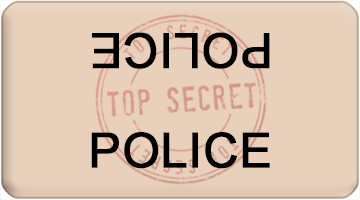
<style>
.page{position:relative;width:360px;height:200px;background:#e8d0bb}
.page>*{position:absolute;margin:0}
.t1{font:48px "ArialMT";color:#000000;font-weight:bold}
</style>
<div class="page">
<p class="t1" style="left:92px;top:32px;width:178px;height:37px;rotate:180deg">POLICE</p>
<p class="t1" style="left:91px;top:132px;width:179px;height:37px">POLICE</p>
</div>
